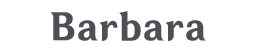
<style>
.page{position:relative;width:256px;height:56px;background:#ffffff}
.page>*{position:absolute;margin:0}
.t1{font:36px "HYWenHei-HEW";color:#4f4e57}
</style>
<div class="page">
<p class="t1" style="left:50px;top:11px;width:156px;height:30px">Barbara</p>
</div>
